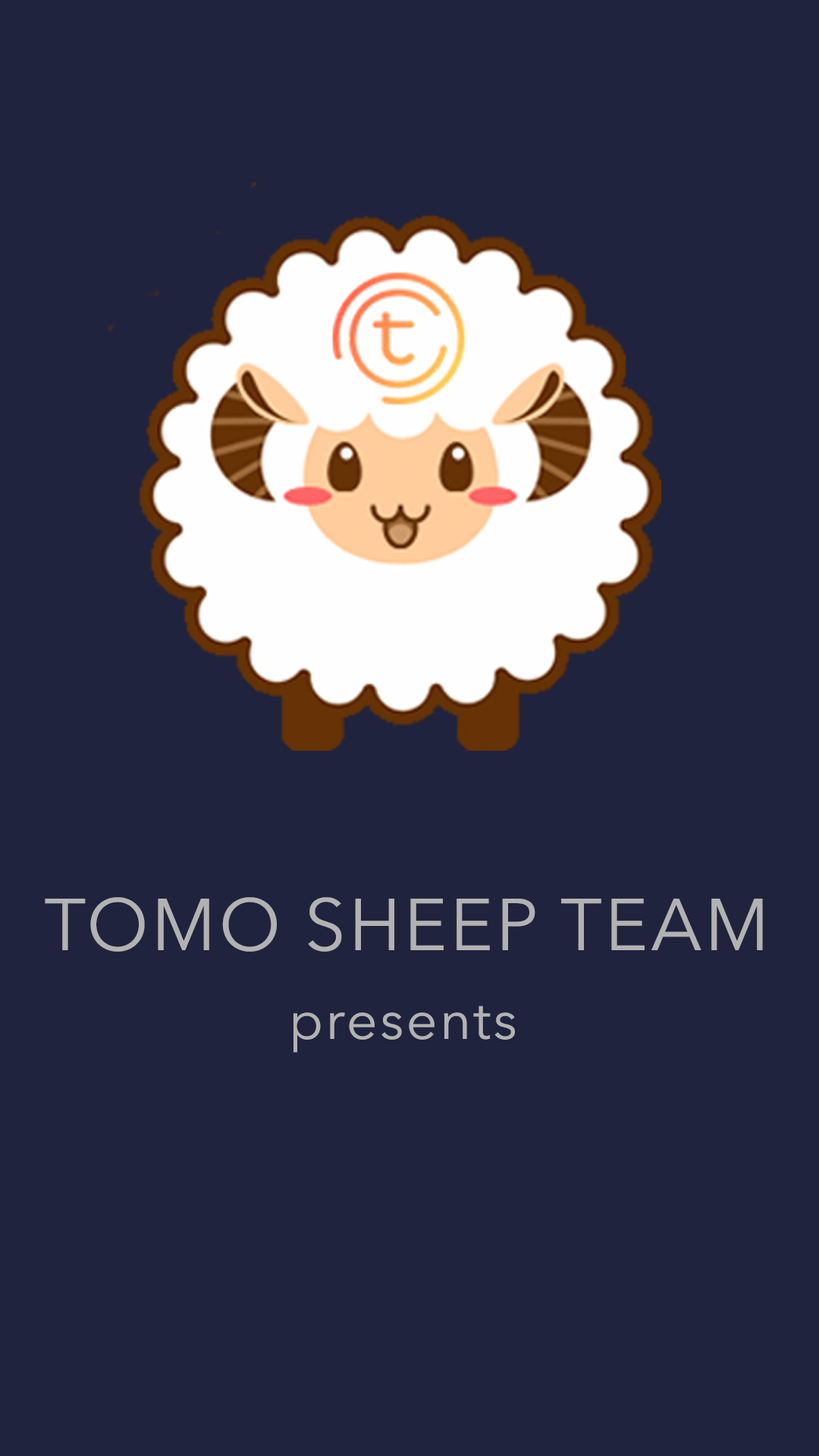
<style>
.page{position:relative;width:819px;height:1456px;background:#1f233d}
.page>*{position:absolute;margin:0}
.t1{font:72.8px "AvenirNext-Regular";letter-spacing:0.04em;color:#b2b2b2}
.t2{font:54.6px "AvenirNext-Regular";letter-spacing:0.04em;color:#b2b2b2}
</style>
<div class="page">
<p class="t1" style="left:45px;top:897px;width:718px;height:55px">TOMO SHEEP TEAM</p>
<p class="t2" style="left:293px;top:1006px;width:222px;height:47px">presents</p>
</div>
